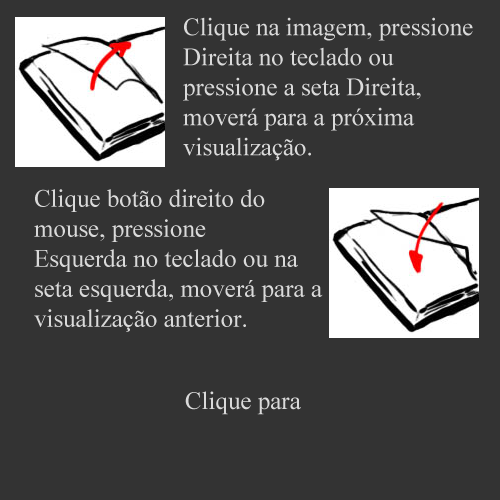
<style>
.page{position:relative;width:500px;height:500px;background:#333333}
.page>*{position:absolute;margin:0}
.t1{font:25px "TimesNewRomanPSMT";color:#dadada}
</style>
<div class="page">
<p class="t1" style="left:183px;top:17px;width:290px;height:144px">Clique na imagem, pressione Direita no teclado ou <br>pressione a seta Direita, moverá para a próxima <br>visualização.</p>
<p class="t1" style="left:34px;top:189px;width:289px;height:143px">Clique botão direito do mouse, pressione <br>Esquerda no teclado ou na seta esquerda, moverá para a visualização anterior.</p>
<p class="t1" style="left:185px;top:391px;width:116px;height:24px">Clique para fechar.</p>
</div>
